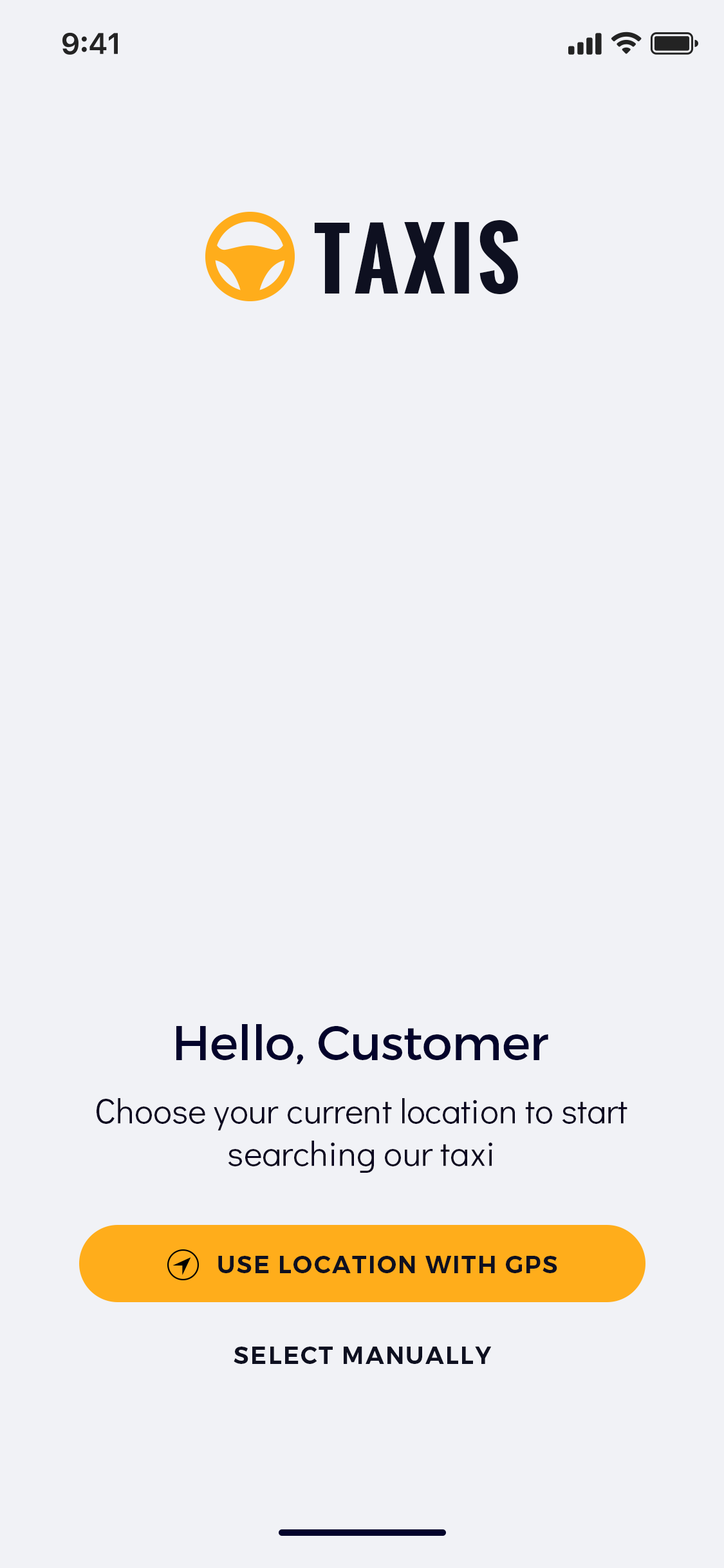
<style>
.page{position:relative;width:724px;height:1568px;background:#f1f2f6}
.page>*{position:absolute;margin:0}
.t1{font:80.5px "Oswald-Bold";letter-spacing:0.06em;color:#0e1020;text-transform:uppercase}
.t2{font:48.3px "Montserrat-Regular";letter-spacing:-0.01em;color:#03032b}
.t3{font:34.9px/42.9px "DidactGothic-Regular";color:#0c0720}
.t4{font:24.1px "Montserrat-SemiBold";letter-spacing:0.06em;color:#0e1020;text-transform:uppercase}
</style>
<div class="page">
<p class="t1" style="left:314px;top:220px;width:204px;height:74px">TAXIS</p>
<p class="t2" style="left:176px;top:1024px;width:372px;height:41px">Hello, Customer</p>
<p class="t3" style="left:97px;top:1098px;width:531px;height:75px;text-align:center">Choose your current location to start<br>searching our taxi</p>
<p class="t4" style="left:218px;top:1256px;width:339px;height:17px">Use location with gps</p>
<p class="t4" style="left:234px;top:1347px;width:258px;height:17px">Select manually</p>
</div>
